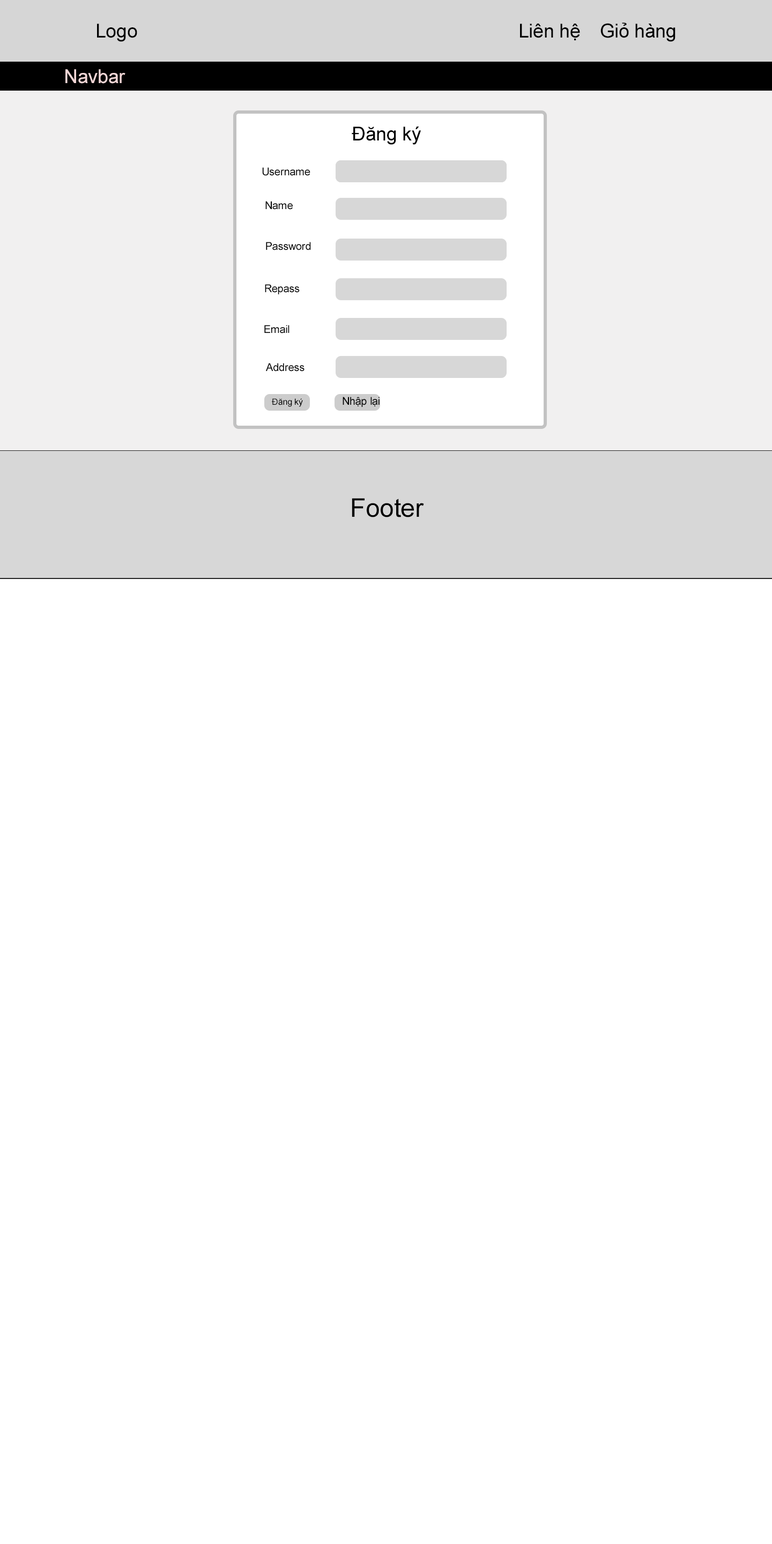
<style>
.page{position:relative;width:772px;height:1544px;background:#ffffff}
.page>*{position:absolute;margin:0}
.t1{font:19.3px "ArialMT";letter-spacing:-0.01em;color:#000000}
.t2{font:19.3px "ArialMT";letter-spacing:-0.01em;color:#f1d6d6}
.t3{font:10.7px "ArialMT";letter-spacing:-0.01em;color:#000000}
.t4{font:8.6px "ArialMT";letter-spacing:-0.01em;color:#000000}
.t5{font:25.7px "ArialMT";letter-spacing:-0.01em;color:#000000}
</style>
<div class="page">
<p class="t1" style="left:97px;top:24px;width:40px;height:18px">Logo</p>
<p class="t1" style="left:520px;top:24px;width:60px;height:17px">Liên hệ</p>
<p class="t1" style="left:601px;top:23px;width:75px;height:19px">Giỏ hàng</p>
<p class="t2" style="left:65px;top:69px;width:60px;height:15px">Navbar</p>
<p class="t1" style="left:352px;top:127px;width:69px;height:18px">Đăng ký</p>
<p class="t3" style="left:262px;top:167px;width:48px;height:9px">Username</p>
<p class="t3" style="left:265px;top:201px;width:28px;height:9px">Name</p>
<p class="t3" style="left:266px;top:242px;width:45px;height:8px">Password</p>
<p class="t3" style="left:265px;top:284px;width:35px;height:10px">Repass</p>
<p class="t3" style="left:264px;top:325px;width:26px;height:9px">Email</p>
<p class="t3" style="left:266px;top:363px;width:39px;height:9px">Address</p>
<p class="t4" style="left:272px;top:398px;width:31px;height:9px">Đăng ký</p>
<p class="t3" style="left:343px;top:397px;width:37px;height:10px">Nhập lại</p>
<p class="t5" style="left:352px;top:498px;width:72px;height:19px">Footer</p>
</div>
